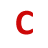
<style>
.page{position:relative;width:48px;height:48px;background:#ffffff}
.page>*{position:absolute;margin:0}
.t1{font:36px "Calibri-Bold";color:#cd0808}
.t2{font:14px "Calibri-Bold";color:#ffffff}
</style>
<div class="page">
<p class="t1" style="left:16px;top:10px;width:17px;height:25px"><span class="t2">     </span>C</p>
</div>
